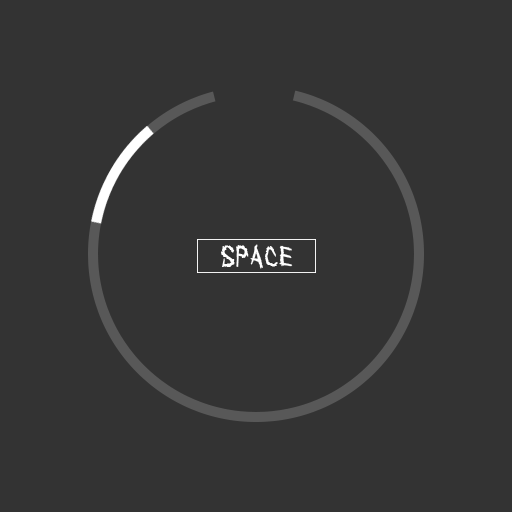
<style>
.page{position:relative;width:512px;height:512px;background:#333333}
.page>*{position:absolute;margin:0}
.t1{font:25px "onryou";letter-spacing:0.04em;color:#ffffff;font-weight:bold}
</style>
<div class="page">
<p class="t1" style="left:221px;top:244px;width:72px;height:25px">SPACE</p>
</div>
